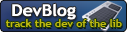
<style>
.page{position:relative;width:127px;height:32px}
.page>*{position:absolute;margin:0}
.t1{font:16.2px "TrebuchetMS-Bold";letter-spacing:-0.005em;color:#fefeff;scale:1.11 1}
.t2{font:9.9px "TrebuchetMS-Bold";letter-spacing:-0.005em;color:#c0ba12;scale:1.11 1}
</style>
<div class="page">
<p class="t1" style="left:12px;top:3px;width:64px;height:17px">DevBlog</p>
<p class="t2" style="left:5px;top:19px;width:117px;height:8px">track the dev of the lib</p>
</div>
